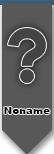
<style>
.page{position:relative;width:54px;height:154px;background:#585858}
.page>*{position:absolute;margin:0}
.t1{font:10.4px "Arial-Black";letter-spacing:-0.01em;color:#000000}
</style>
<div class="page">
<p class="t1" style="left:4px;top:107px;width:46px;height:7px">Noname</p>
</div>
